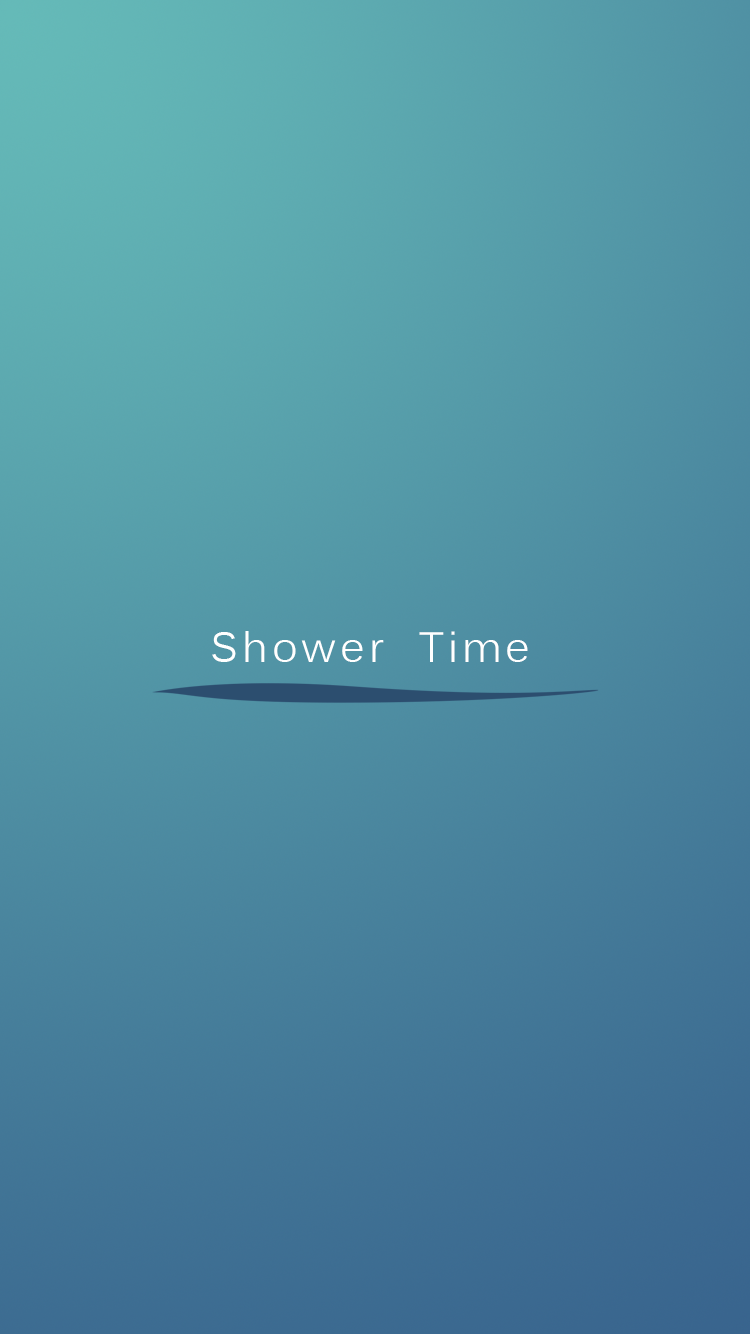
<style>
.page{position:relative;width:750px;height:1334px}
.page>*{position:absolute;margin:0}
.t1{font:41.7px "Kalinga";letter-spacing:0.1em;color:#ffffff}
</style>
<div class="page">
<p class="t1" style="left:212px;top:631px;width:316px;height:31px">Shower  Time</p>
</div>
